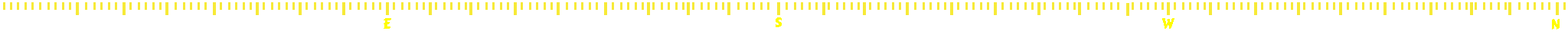
<style>
.page{position:relative;width:1568px;height:34px;background:#ffffff}
.page>*{position:absolute;margin:0}
.t1{font:13.8px "CarterOne";color:#fffc00}
</style>
<div class="page">
<p class="t1" style="left:776px;top:18px;width:6px;height:10px">S</p>
<p class="t1" style="left:384px;top:18px;width:7px;height:11px">E</p>
<p class="t1" style="left:1162px;top:18px;width:12px;height:11px">W</p>
<p class="t1" style="left:1552px;top:19px;width:8px;height:11px">N</p>
</div>
